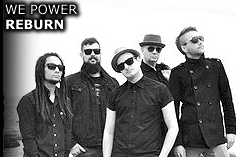
<style>
.page{position:relative;width:236px;height:157px;background:#ffffff}
.page>*{position:absolute;margin:0}
.t1{font:12.7px "Verdana";color:#ffffff}
.t2{font:12.7px "Verdana-Bold";color:#ffffff}
</style>
<div class="page">
<p class="t1" style="left:5px;top:4px;width:73px;height:26px">WE POWER<br><span class="t2">REBURN</span></p>
</div>
